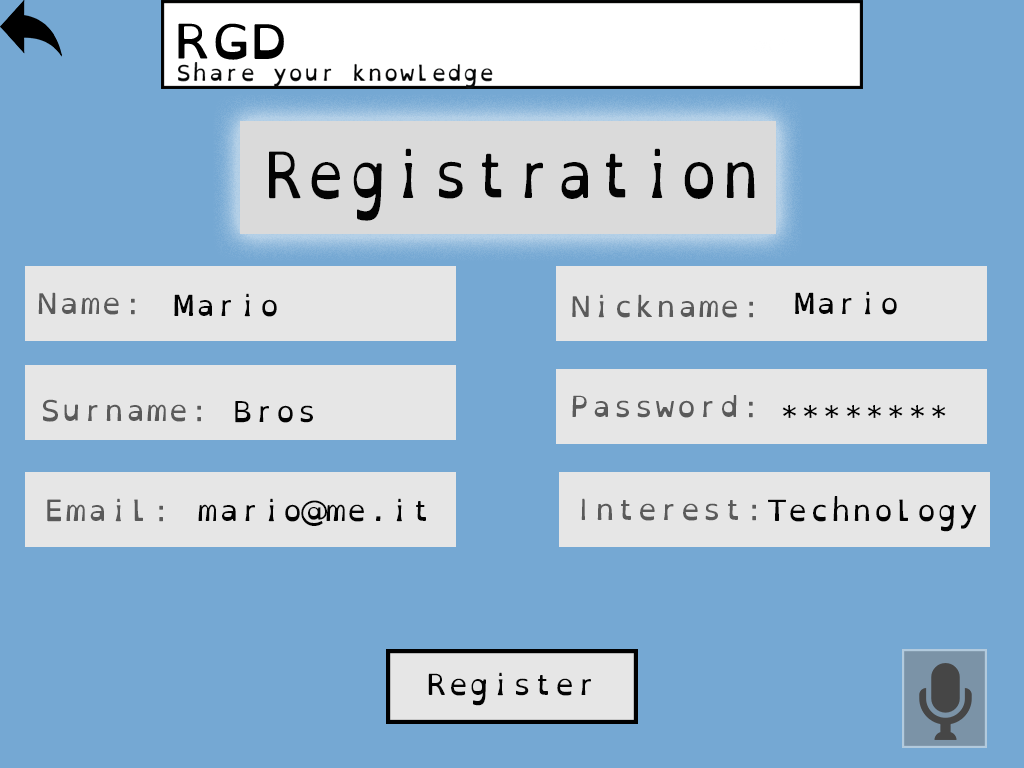
<style>
.page{position:relative;width:1024px;height:768px;background:#75a8d3}
.page>*{position:absolute;margin:0}
.t1{font:64.2px "OpenDyslexicMono-Regular";color:#030303;scale:0.88 1}
.t2{font:29.2px "OpenDyslexicMono-Regular";color:#5a5a5a}
.t3{font:29.2px "OpenDyslexicMono-Regular";color:#030303}
</style>
<div class="page">
<p class="t1" style="left:269px;top:148px;width:486px;height:73px">Registration</p>
<p class="t2" style="left:38px;top:292px;width:97px;height:23px">Name:</p>
<p class="t3" style="left:174px;top:293px;width:103px;height:24px">Mario</p>
<p class="t2" style="left:572px;top:294px;width:181px;height:24px">Nickname:</p>
<p class="t3" style="left:795px;top:291px;width:102px;height:24px">Mario</p>
<p class="t2" style="left:43px;top:399px;width:158px;height:23px">Surname:</p>
<p class="t3" style="left:235px;top:401px;width:78px;height:22px">Bros</p>
<p class="t2" style="left:572px;top:395px;width:181px;height:23px">Password:</p>
<p class="t3" style="left:782px;top:405px;width:164px;height:13px">********</p>
<p class="t3" style="left:768px;top:496px;width:209px;height:36px">Technology</p>
<p class="t2" style="left:47px;top:498px;width:116px;height:24px">Email:</p>
<p class="t3" style="left:198px;top:498px;width:228px;height:28px">mario@me.it</p>
<p class="t2" style="left:581px;top:498px;width:175px;height:23px">Interest:</p>
<p class="t3" style="left:428px;top:672px;width:163px;height:34px">Register</p>
</div>
